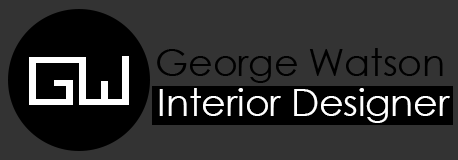
<style>
.page{position:relative;width:458px;height:160px;background:#333333}
.page>*{position:absolute;margin:0}
.t1{font:37.5px "CenturyGothic";color:#000000}
.t2{font:37.5px "CenturyGothic";color:#ffffff}
</style>
<div class="page">
<p class="t1" style="left:157px;top:48px;width:286px;height:35px">George Watson</p>
<p class="t2" style="left:159px;top:88px;width:291px;height:35px">Interior Designer</p>
</div>
